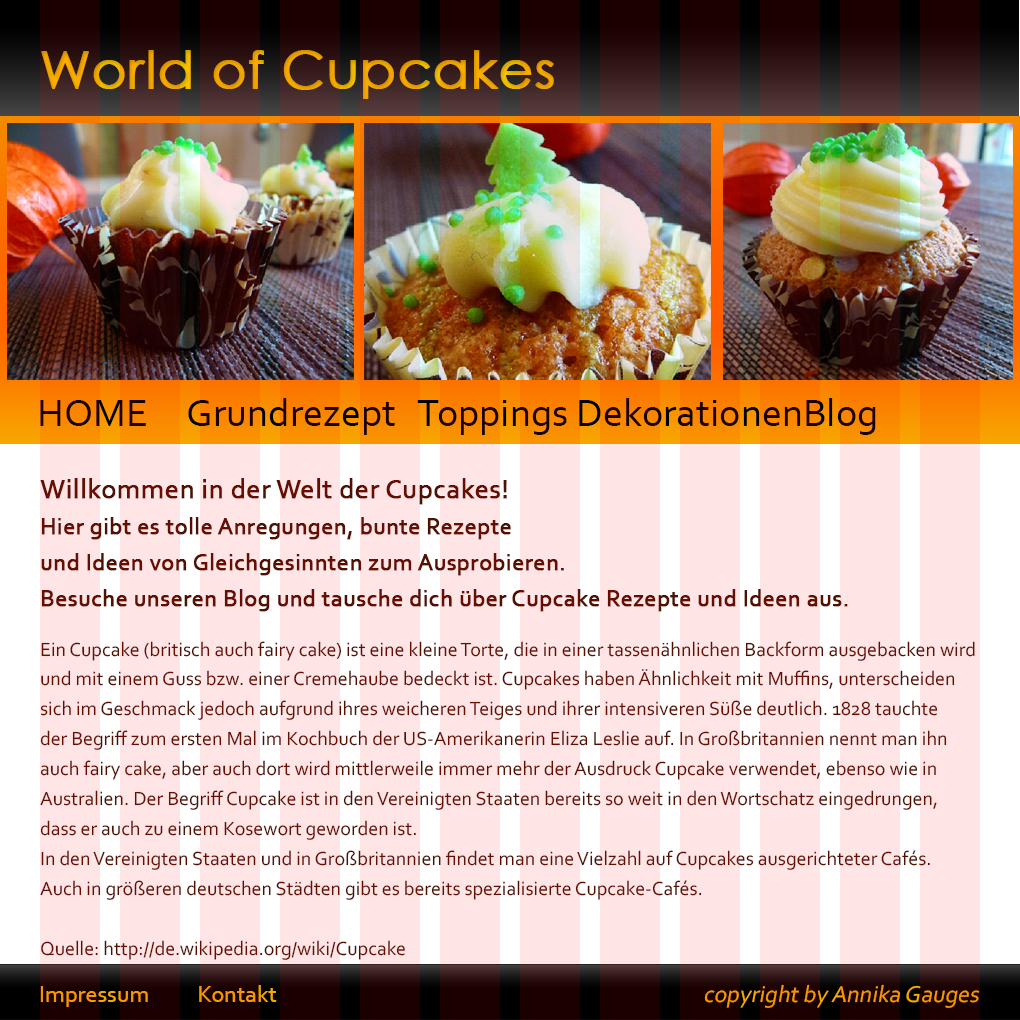
<style>
.page{position:relative;width:1020px;height:1020px;background:#ffe5e5}
.page>*{position:absolute;margin:0}
.t1{font:52.1px "CenturyGothic";color:#eba500;font-weight:bold}
.t2{font:40px "Corbel";color:#1a0000}
.t3{font:24px "Corbel";color:#531001;font-weight:bold}
.t4{font:28px "Corbel";color:#531001;font-weight:bold}
.t5{font:20px "Corbel";color:#531001}
.t6{font:24px "Corbel";color:#f5aa00}
.t7{font:24px "Corbel";color:#f5aa00;font-style:italic}
</style>
<div class="page">
<p class="t1" style="left:41px;top:50px;width:513px;height:49px">World of Cupcakes</p>
<p class="t2" style="left:40px;top:398px;width:836px;height:37px">HOME     Grundrezept   Toppings DekorationenBlog</p>
<p class="t3" style="left:40px;top:478px;width:808px;height:134px"><span class="t4">Willkommen in der Welt der Cupcakes!<br></span>Hier gibt es tolle Anregungen, bunte Rezepte <br>und Ideen von Gleichgesinnten zum Ausprobieren.<br>Besuche unseren Blog und tausche dich über Cupcake Rezepte und Ideen aus.</p>
<p class="t5" style="left:40px;top:641px;width:935px;height:319px">Ein Cupcake (britisch auch fairy cake) ist eine kleine Torte, die in einer tassenähnlichen Backform ausgebacken wird <br>und mit einem Guss bzw. einer Cremehaube bedeckt ist. Cupcakes haben Ähnlichkeit mit Muffins, unterscheiden<br>sich im Geschmack jedoch aufgrund ihres weicheren Teiges und ihrer intensiveren Süße deutlich. 1828 tauchte<br>der Begriff zum ersten Mal im Kochbuch der US-Amerikanerin Eliza Leslie auf. In Großbritannien nennt man ihn <br>auch fairy cake, aber auch dort wird mittlerweile immer mehr der Ausdruck Cupcake verwendet, ebenso wie in <br>Australien. Der Begriff Cupcake ist in den Vereinigten Staaten bereits so weit in den Wortschatz eingedrungen, <br>dass er auch zu einem Kosewort geworden ist.<br>In den Vereinigten Staaten und in Großbritannien findet man eine Vielzahl auf Cupcakes ausgerichteter Cafés. <br>Auch in größeren deutschen Städten gibt es bereits spezialisierte Cupcake-Cafés.<br><br>Quelle: http://de.wikipedia.org/wiki/Cupcake</p>
<p class="t6" style="left:40px;top:984px;width:940px;height:24px">Impressum          Kontakt                                                      <span class="t7">copyright by Annika Gauges</span></p>
</div>
